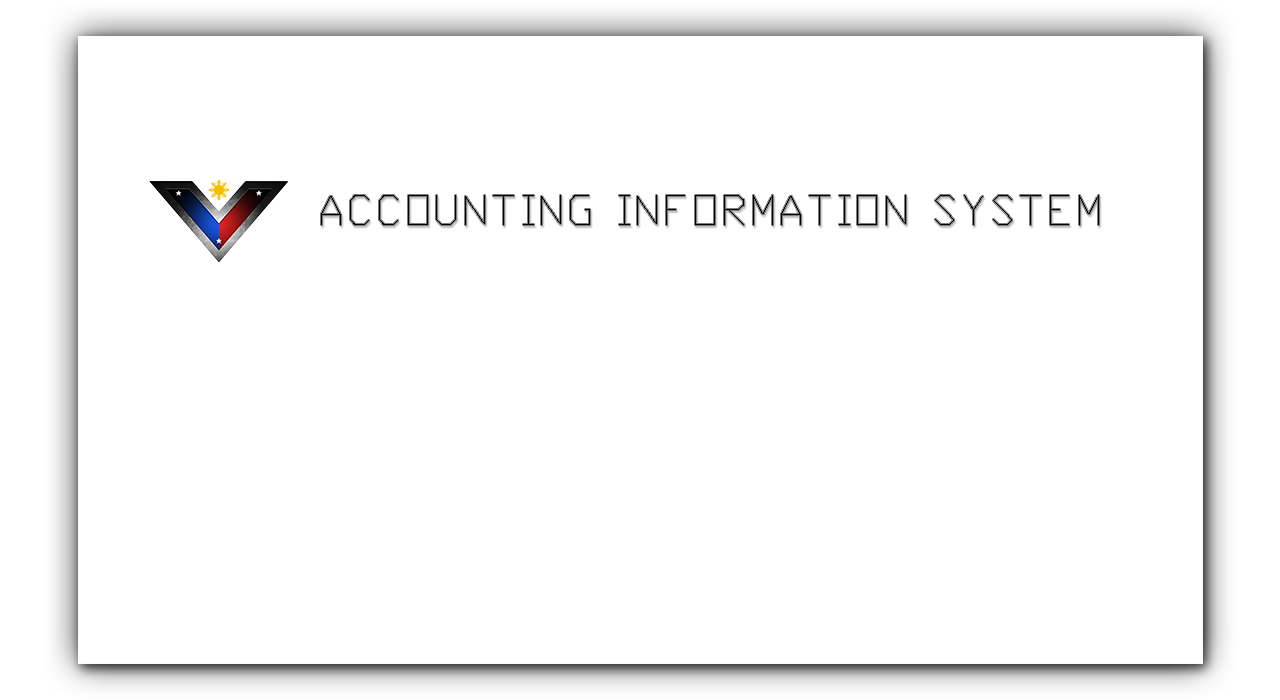
<style>
.page{position:relative;width:1280px;height:700px;background:#ffffff}
.page>*{position:absolute;margin:0}
.t1{font:39.4px "Proxy1";color:#000000}
</style>
<div class="page">
<p class="t1" style="left:321px;top:195px;width:778px;height:30px">ACCOUNTING INFORMATION SYSTEM</p>
</div>
